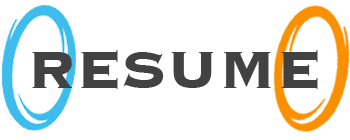
<style>
.page{position:relative;width:350px;height:140px;background:#ffffff}
.page>*{position:absolute;margin:0}
.t1{font:68.4px "Copperplate-Bold";color:#424242}
</style>
<div class="page">
<p class="t1" style="left:32px;top:50px;width:286px;height:39px">RESUME</p>
</div>
